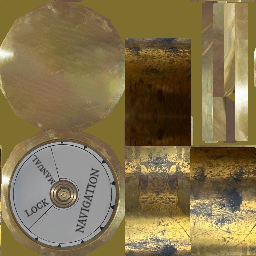
<style>
.page{position:relative;width:256px;height:256px}
.page>*{position:absolute;margin:0}
.t1{font:7.8px "IM_FELL_DW_Pica_Roman";letter-spacing:-0.025em;color:#282625;text-transform:uppercase}
.t2{font:11.6px "IM_FELL_DW_Pica_Roman";letter-spacing:-0.025em;color:#282625;text-transform:uppercase;scale:0.93 1}
.t3{font:9.4px "IM_FELL_DW_Pica_Roman";letter-spacing:-0.025em;color:#282625;text-transform:uppercase}
</style>
<div class="page">
<p class="t1" style="left:32px;top:154px;width:24px;height:31px;rotate:-128deg">Manual</p>
<p class="t2" style="left:75px;top:167px;width:25px;height:67px;rotate:-75deg">navigation</p>
<p class="t3" style="left:24px;top:198px;width:26px;height:19px;rotate:-31deg">lock</p>
</div>
